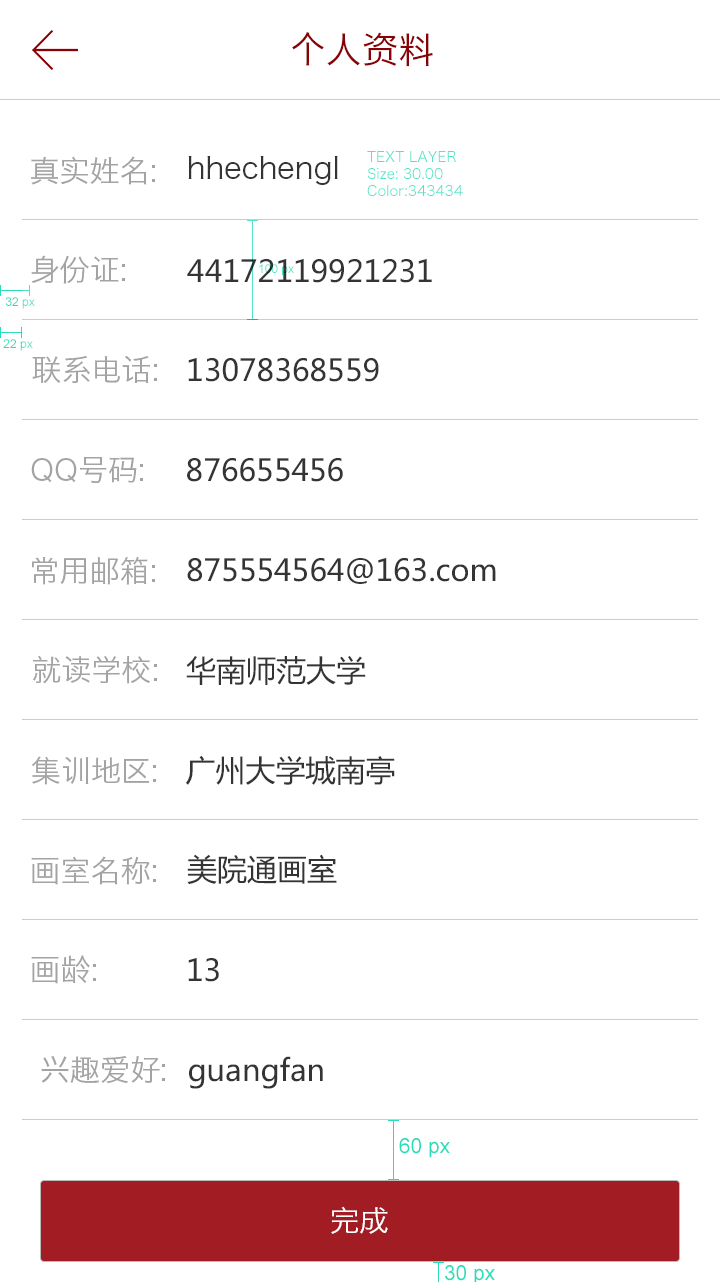
<style>
.page{position:relative;width:720px;height:1282px;background:#ffffff}
.page>*{position:absolute;margin:0}
.t1{font:36px "HiraginoSansGB-W3";color:#8a0105}
.t2{font:30px "HiraginoSansGB-W3";color:#a3a3a3}
.t3{font:30px "HiraginoSansGB-W3";color:#343434}
.t4{font:14px "HiraginoSansGB-W3";color:#53e4c7}
.t5{font:30px "MicrosoftYaHei";color:#343434}
.t6{font:12px "ArialMT"}
.t7{font:12px "ArialMT";color:#28ddb9}
.t8{font:20.8px "ArialMT";color:#28ddb9}
.t9{font:30px "HiraginoSansGB-W3";color:#ffffff}
</style>
<div class="page">
<p class="t1" style="left:292px;top:32px;width:141px;height:35px">个人资料</p>
<p class="t2" style="left:31px;top:156px;width:124px;height:29px">真实姓名:</p>
<p class="t3" style="left:188px;top:156px;width:150px;height:29px">hhechengl</p>
<p class="t4" style="left:367px;top:151px;width:96px;height:45px">TEXT LAYER<br>Size: 30.00<br>Color:343434</p>
<p class="t2" style="left:31px;top:255px;width:94px;height:29px">身份证:</p>
<p class="t5" style="left:187px;top:258px;width:245px;height:25px">44172119921231</p>
<p class="t6" style="left:259px;top:264px;width:35px;height:12px">100 px</p>
<p class="t7" style="left:5px;top:297px;width:30px;height:12px">32 px</p>
<p class="t7" style="left:3px;top:339px;width:30px;height:12px">22 px</p>
<p class="t2" style="left:32px;top:355px;width:125px;height:29px">联系电话:</p>
<p class="t5" style="left:188px;top:357px;width:191px;height:25px">13078368559</p>
<p class="t2" style="left:31px;top:456px;width:112px;height:27px">QQ号码:</p>
<p class="t5" style="left:187px;top:458px;width:156px;height:24px">876655456</p>
<p class="t2" style="left:32px;top:556px;width:123px;height:29px">常用邮箱:</p>
<p class="t5" style="left:187px;top:557px;width:309px;height:27px">875554564@163.com</p>
<p class="t2" style="left:33px;top:655px;width:124px;height:29px">就读学校:</p>
<p class="t5" style="left:186px;top:656px;width:180px;height:29px">华南师范大学</p>
<p class="t2" style="left:31px;top:756px;width:125px;height:29px">集训地区:</p>
<p class="t5" style="left:185px;top:756px;width:210px;height:29px">广州大学城南亭</p>
<p class="t2" style="left:31px;top:856px;width:125px;height:29px">画室名称:</p>
<p class="t5" style="left:187px;top:854px;width:150px;height:30px">美院通画室</p>
<p class="t2" style="left:31px;top:955px;width:65px;height:29px">画龄:</p>
<p class="t5" style="left:188px;top:957px;width:31px;height:25px">13</p>
<p class="t2" style="left:41px;top:1055px;width:124px;height:29px">兴趣爱好:</p>
<p class="t5" style="left:189px;top:1056px;width:134px;height:33px">guangfan</p>
<p class="t8" style="left:399px;top:1138px;width:51px;height:20px">60 px</p>
<p class="t9" style="left:331px;top:1206px;width:57px;height:28px">完成</p>
</div>
